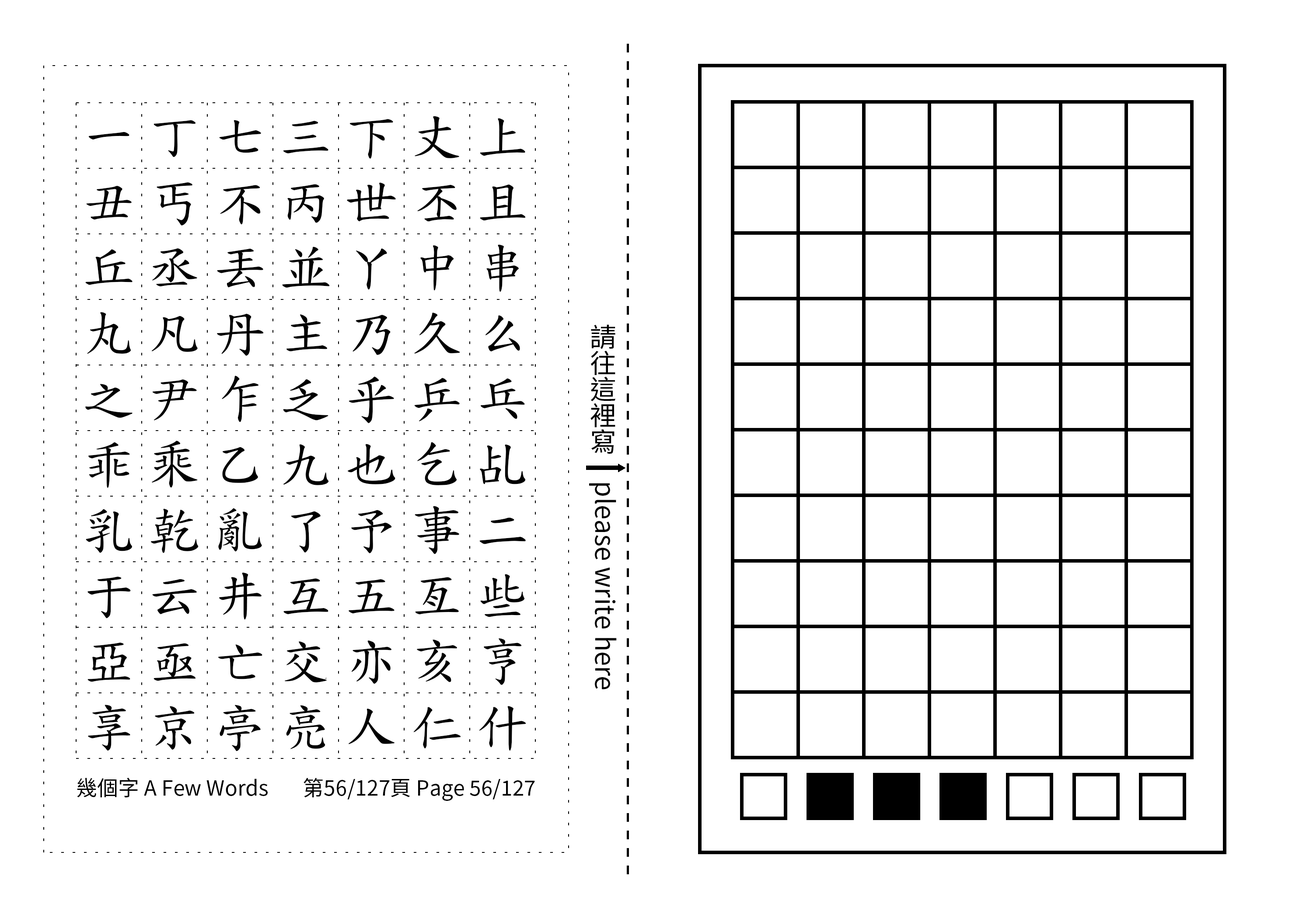
<style>
.page{position:relative;width:1299px;height:918px;background:#ffffff}
.page>*{position:absolute;margin:0}
.t1{font:52.5px/65.6px "TW-Kai-98_1";letter-spacing:0.25em;color:#000000}
.t2{font:26.2px "SourceHanSansTC-Regular";color:#000000}
.t3{font:21px "SourceHanSansTC-Regular";color:#000000}
</style>
<div class="page">
<p class="t1" style="left:85px;top:116px;width:441px;height:636px;text-align:center">一丁七三下丈上丑丐不丙世丕且丘丞丟並丫中串丸凡丹主乃久么之尹乍乏乎乒乓乖乘乙九也乞乩乳乾亂了予事二于云井互五亙些亞亟亡交亦亥亨享京亭亮人仁什</p>
<p class="t2" style="left:589px;top:324px;width:28px;height:366px;text-align:center">請往這裡寫　please write here</p>
<p class="t3" style="left:77px;top:778px;width:191px;height:20px">幾個字 A Few Words</p>
<p class="t3" style="left:303px;top:778px;width:232px;height:23px">第56/127頁 Page 56/127</p>
</div>
